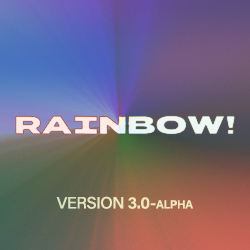
<style>
.page{position:relative;width:250px;height:250px}
.page>*{position:absolute;margin:0}
.t1{font:16.5px "AcuminPro-Semibold";letter-spacing:-0.025em;color:#ece6c0;font-variant:small-caps}
.t2{font:16.5px "AcuminPro-Medium";letter-spacing:-0.025em;color:#ece6c0;text-transform:uppercase}
</style>
<div class="page">
<p class="t1" style="left:56px;top:196px;width:137px;height:13px"><span class="t2">Version </span>3.0-alpha</p>
</div>
